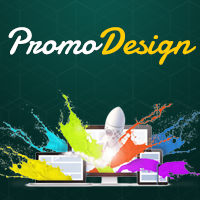
<style>
.page{position:relative;width:200px;height:200px}
.page>*{position:absolute;margin:0}
.t1{font:37.8px "Damion";color:#ffcc01}
.t2{font:37.8px "Damion";color:#ffffff}
</style>
<div class="page">
<p class="t1" style="left:8px;top:27px;width:188px;height:38px"><span class="t2">Promo</span>Design</p>
</div>
